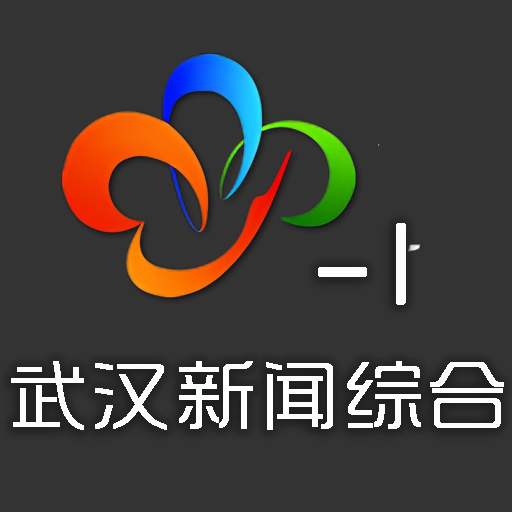
<style>
.page{position:relative;width:512px;height:512px;background:#333333}
.page>*{position:absolute;margin:0}
.t1{font:106.7px "SJshishang-Regular";letter-spacing:0.02em;color:#fcfdfd;font-weight:bold}
.t2{font:80px "SJshishang-Regular";letter-spacing:0.02em;color:#fcfdfd;font-weight:bold}
</style>
<div class="page">
<p class="t1" style="left:318px;top:223px;width:88px;height:82px">-1</p>
<p class="t2" style="left:11px;top:361px;width:493px;height:69px">武汉新闻综合</p>
</div>
